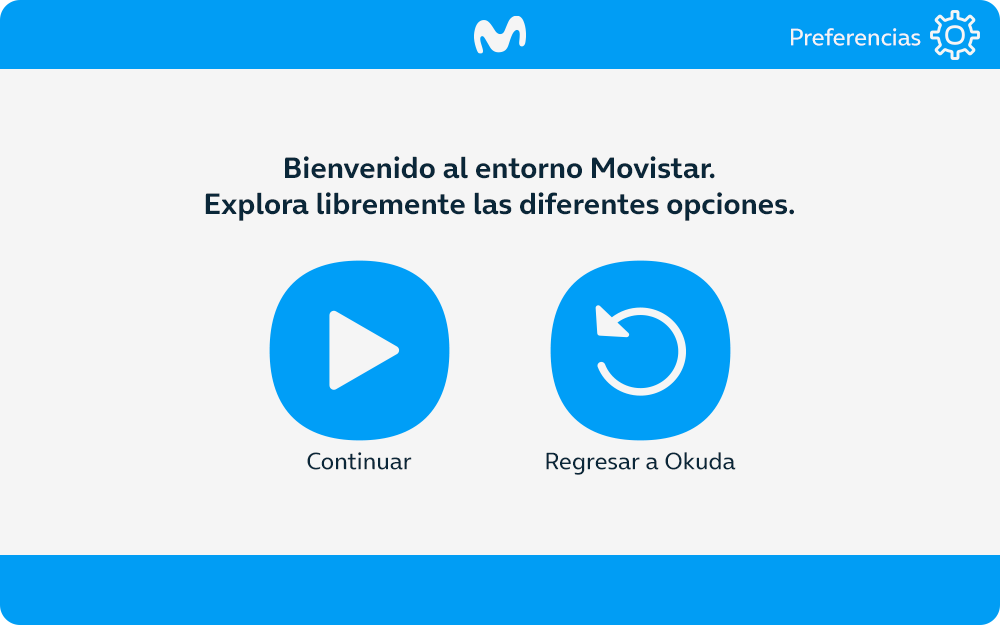
<style>
.page{position:relative;width:1000px;height:625px;background:#f5f5f5}
.page>*{position:absolute;margin:0}
.t1{font:24px "OnAir-Regular";color:#f5f5f5}
.t2{font:30px "OnAir-Bold";color:#0a2739}
.t3{font:24px "OnAir-Regular";color:#0a2739}
</style>
<div class="page">
<p class="t1" style="left:791px;top:28px;width:130px;height:18px">Preferencias</p>
<p class="t2" style="left:205px;top:156px;width:589px;height:65px;text-align:center">Bienvenido al entorno Movistar.<br>Explora libremente las diferentes opciones.</p>
<p class="t3" style="left:307px;top:452px;width:105px;height:18px">Continuar</p>
<p class="t3" style="left:546px;top:452px;width:190px;height:23px">Regresar a Okuda</p>
</div>
